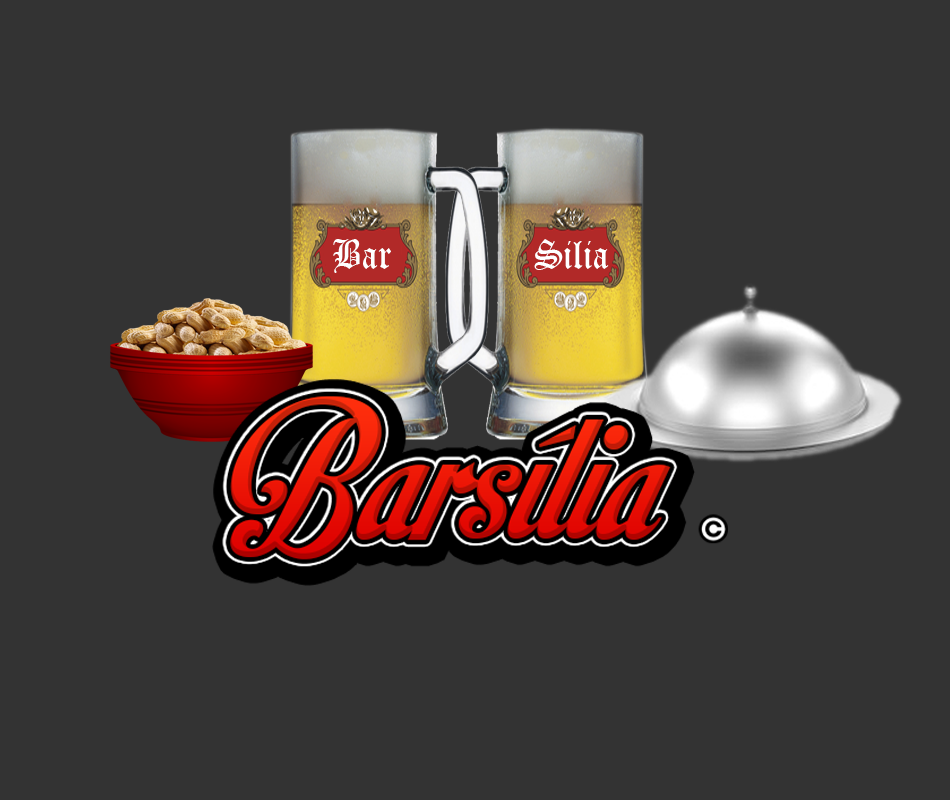
<style>
.page{position:relative;width:950px;height:800px;background:#333333}
.page>*{position:absolute;margin:0}
.t1{font:38.6px "OldEnglishTextMT";color:#ffffff;scale:0.92 1}
</style>
<div class="page">
<p class="t1" style="left:333px;top:239px;width:58px;height:34px">Bar</p>
<p class="t1" style="left:534px;top:239px;width:75px;height:31px">Silia</p>
</div>
